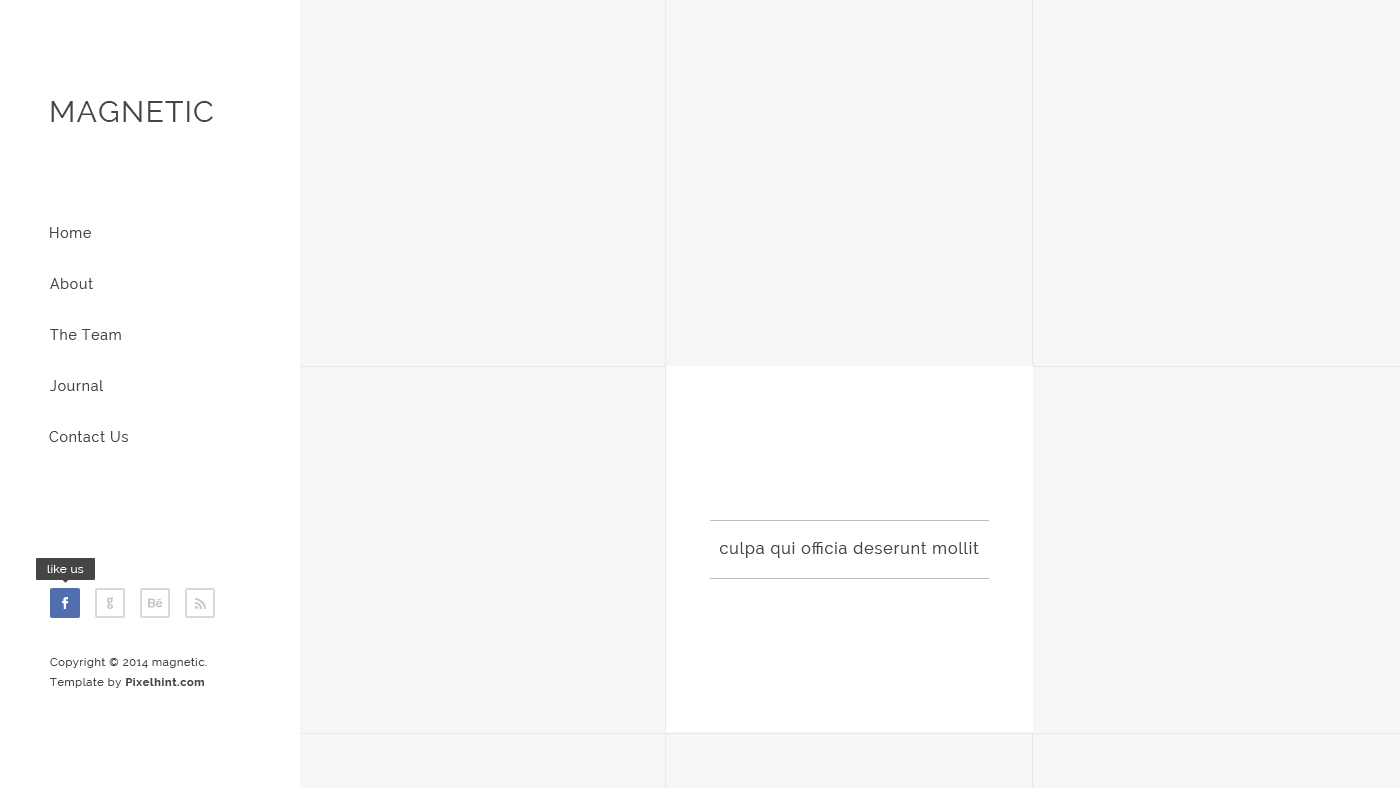
<style>
.page{position:relative;width:1400px;height:788px;background:#f6f6f6}
.page>*{position:absolute;margin:0}
.t1{font:30px "Raleway";letter-spacing:0.04em;color:#454545;text-transform:uppercase}
.t2{font:14px "Raleway";letter-spacing:0.06em;color:#454545}
.t3{font:16px "Raleway";letter-spacing:0.06em;color:#454545}
.t4{font:12px "Raleway";letter-spacing:0.02em;color:#ffffff}
.t5{font:20px "Socialico";letter-spacing:0.06em;color:#ffffff}
.t6{font:20px "Socialico";letter-spacing:0.06em;color:#c7c7c7}
.t7{font:18px "Socialico";letter-spacing:0.06em;color:#c7c6c6}
.t8{font:11px/20px "Raleway";letter-spacing:0.06em;color:#454545}
.t9{font:11px/20px "Raleway-Bold";letter-spacing:0.06em;color:#454545}
</style>
<div class="page">
<p class="t1" style="left:51px;top:101px;width:162px;height:21px">magnetic</p>
<p class="t2" style="left:50px;top:227px;width:41px;height:11px">Home</p>
<p class="t2" style="left:50px;top:278px;width:43px;height:11px">About</p>
<p class="t2" style="left:50px;top:329px;width:71px;height:11px">The Team</p>
<p class="t2" style="left:50px;top:380px;width:54px;height:11px">Journal</p>
<p class="t2" style="left:49px;top:431px;width:79px;height:11px">Contact Us</p>
<p class="t3" style="left:720px;top:542px;width:259px;height:16px">culpa qui officia deserunt mollit</p>
<p class="t4" style="left:47px;top:565px;width:37px;height:8px">like us</p>
<p class="t5" style="left:61px;top:597px;width:7px;height:12px">F</p>
<p class="t5" style="left:61px;top:597px;width:7px;height:12px">F</p>
<p class="t6" style="left:107px;top:597px;width:6px;height:12px">G</p>
<p class="t6" style="left:148px;top:598px;width:15px;height:10px">E</p>
<p class="t7" style="left:195px;top:598px;width:11px;height:11px">R</p>
<p class="t8" style="left:50px;top:658px;width:157px;height:30px">Copyright © 2014 magnetic.<br>Template by <span class="t9">Pixelhint.com</span></p>
</div>
